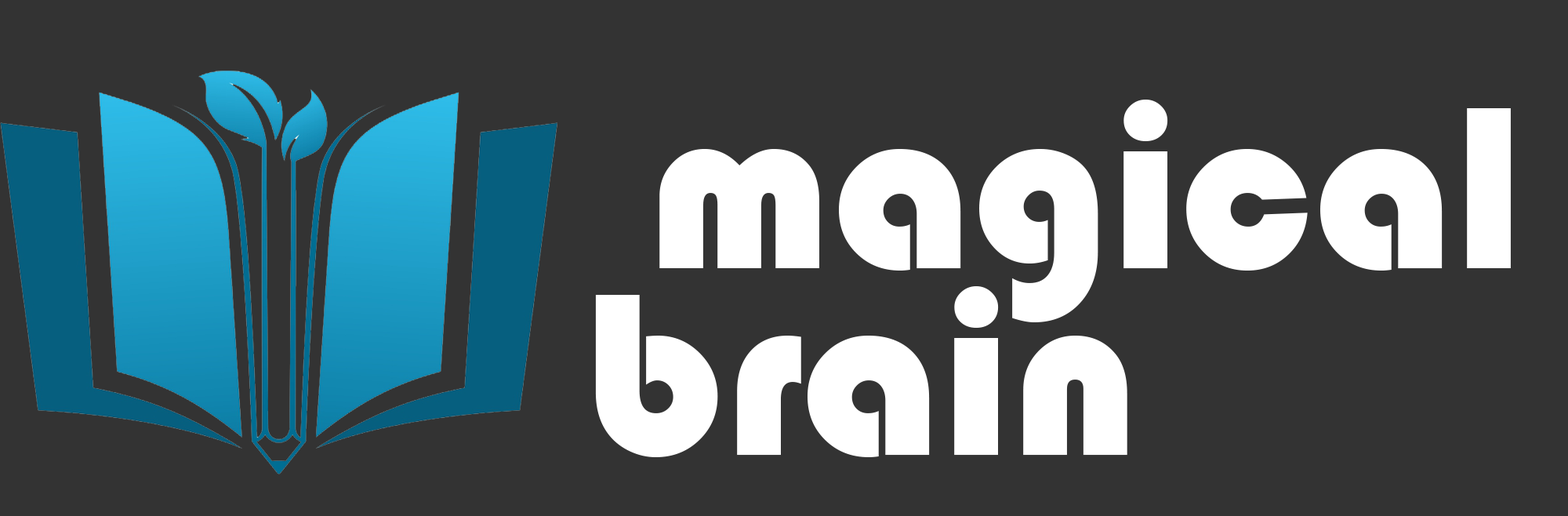
<style>
.page{position:relative;width:1568px;height:516px;background:#333333}
.page>*{position:absolute;margin:0}
.t1{font:240.1px "Bauhaus93";color:#ffffff}
</style>
<div class="page">
<p class="t1" style="left:659px;top:100px;width:852px;height:222px">magical</p>
<p class="t1" style="left:595px;top:286px;width:532px;height:171px">brain</p>
</div>
